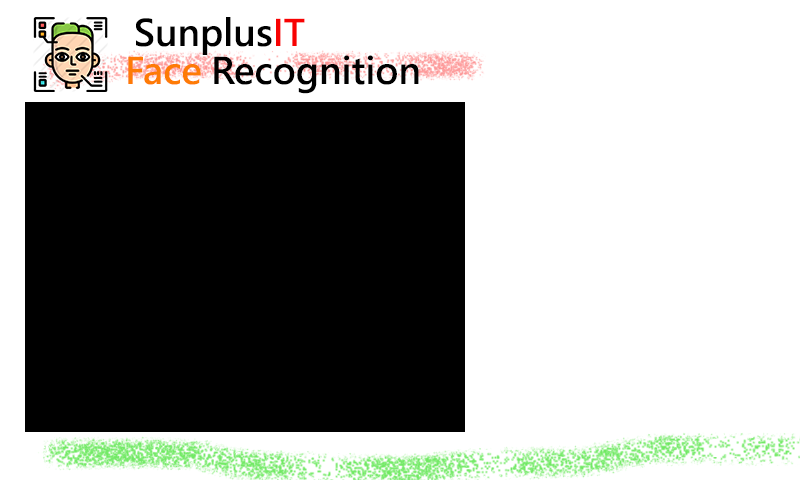
<style>
.page{position:relative;width:800px;height:480px;background:#ffffff}
.page>*{position:absolute;margin:0}
.t1{font:36px "MicrosoftJhengHeiBold";color:#000000}
.t2{font:36px "MicrosoftJhengHeiBold";color:#f80202}
.t3{font:36px "MicrosoftJhengHeiBold";color:#fe7b06}
</style>
<div class="page">
<p class="t1" style="left:136px;top:17px;width:169px;height:38px">Sunplus<span class="t2">IT</span></p>
<p class="t1" style="left:128px;top:55px;width:291px;height:39px"><span class="t3">Face</span> Recognition</p>
</div>
